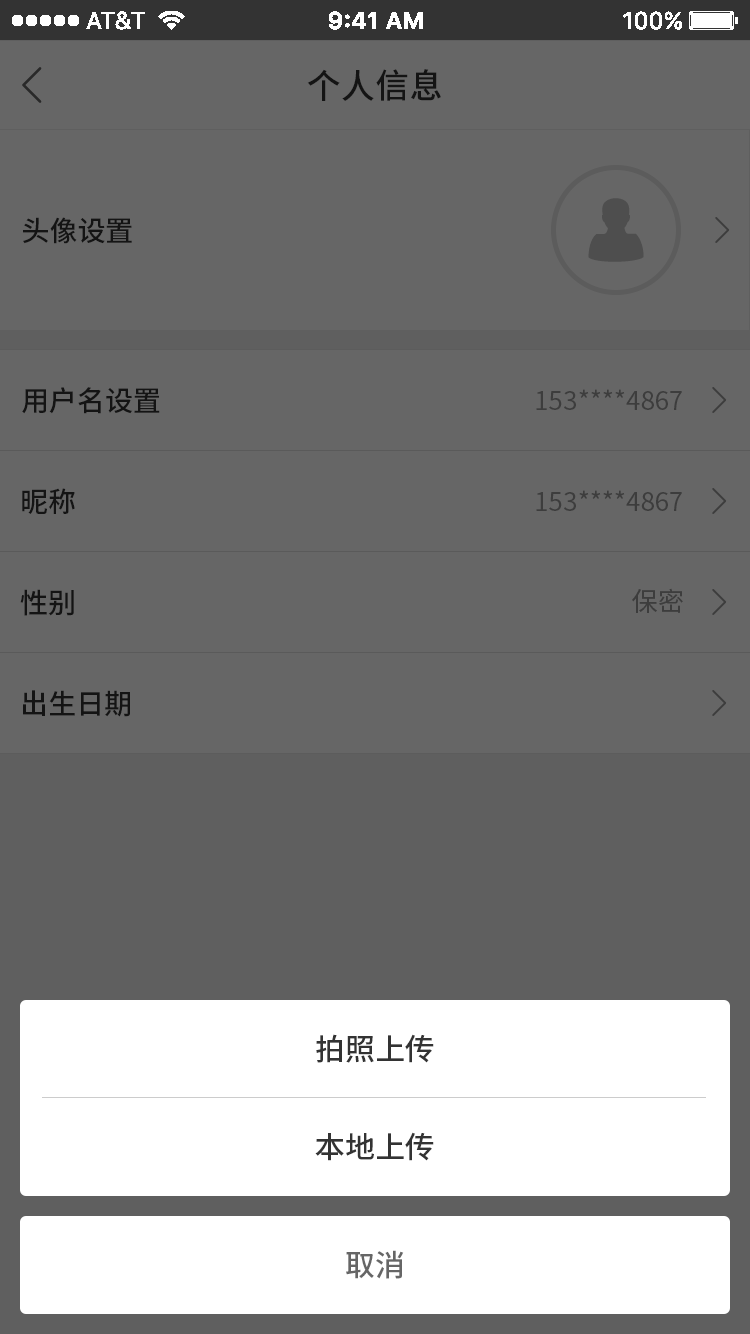
<style>
.page{position:relative;width:750px;height:1334px;background:#666666}
.page>*{position:absolute;margin:0}
.t1{font:34px "SourceHanSansCN-Medium";color:#141414}
.t2{font:28px "SourceHanSansCN-Medium";color:#141414}
.t3{font:26px "SourceHanSansCN-Regular";color:#3d3d3d}
.t4{font:30px "SourceHanSansCN-Medium";color:#333333}
.t5{font:30px "SourceHanSansCN-Medium";color:#666666}
</style>
<div class="page">
<p class="t1" style="left:307px;top:69px;width:134px;height:32px">个人信息</p>
<p class="t2" style="left:23px;top:217px;width:109px;height:27px">头像设置</p>
<p class="t2" style="left:22px;top:387px;width:138px;height:27px">用户名设置</p>
<p class="t3" style="left:536px;top:389px;width:146px;height:21px">153****4867</p>
<p class="t2" style="left:22px;top:488px;width:53px;height:26px">昵称</p>
<p class="t3" style="left:536px;top:490px;width:146px;height:21px">153****4867</p>
<p class="t2" style="left:20px;top:589px;width:54px;height:27px">性别</p>
<p class="t3" style="left:632px;top:588px;width:51px;height:25px">保密</p>
<p class="t2" style="left:23px;top:690px;width:107px;height:27px">出生日期</p>
<p class="t4" style="left:316px;top:1034px;width:118px;height:29px">拍照上传</p>
<p class="t4" style="left:315px;top:1132px;width:119px;height:29px">本地上传</p>
<p class="t5" style="left:346px;top:1250px;width:58px;height:29px">取消</p>
</div>
